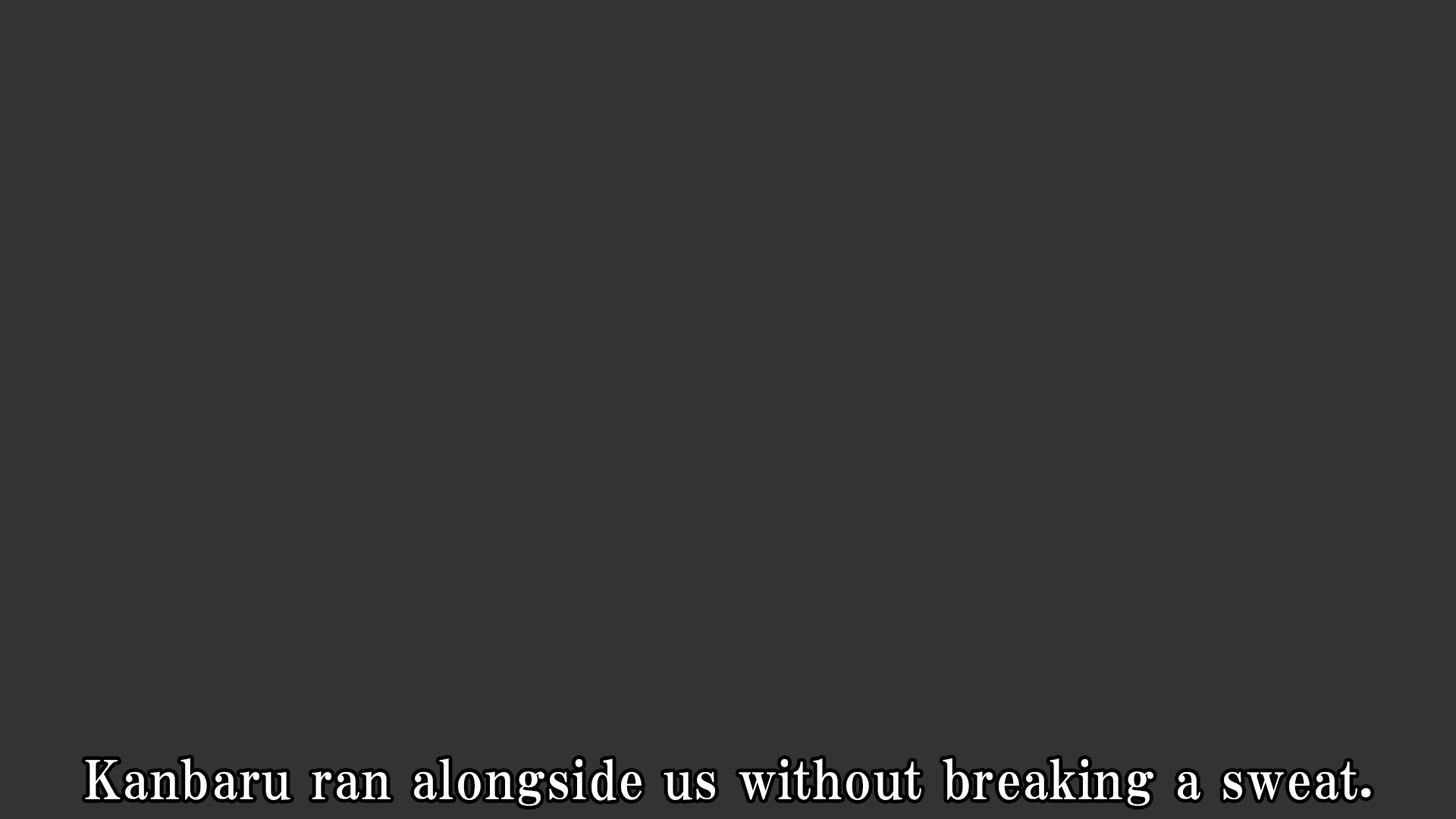
<style>
.page{position:relative;width:1456px;height:819px;background:#333333}
.page>*{position:absolute;margin:0}
.t1{font:53.1px "HGPMinchoE";letter-spacing:0.025em;color:#ffffff}
</style>
<div class="page">
<p class="t1" style="left:85px;top:758px;width:1286px;height:48px">Kanbaru ran alongside us without breaking a sweat.</p>
</div>
